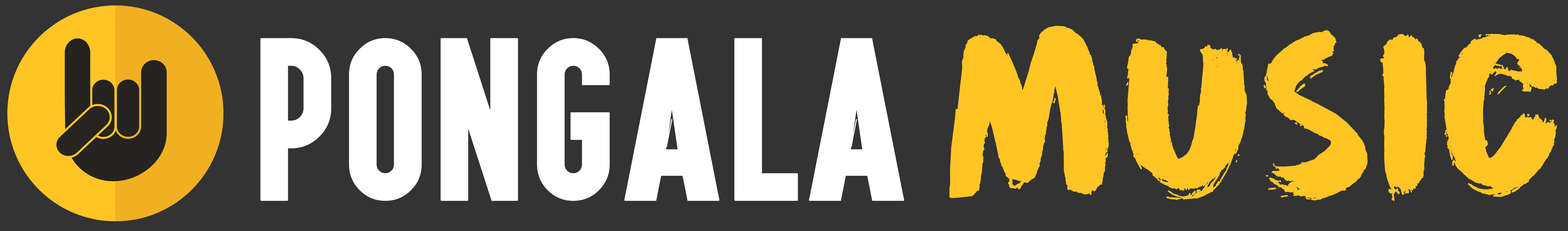
<style>
.page{position:relative;width:1568px;height:231px;background:#333333}
.page>*{position:absolute;margin:0}
.t1{font:202.3px "DKCinnabarBrush";color:#ffc525;text-transform:uppercase;font-weight:bold}
.t2{font:190.6px "Aku&Kamu";letter-spacing:0.025em;color:#ffffff;text-transform:uppercase;font-weight:bold}
</style>
<div class="page">
<p class="t1" style="left:949px;top:26px;width:608px;height:175px">MUSIC</p>
<p class="t2" style="left:260px;top:38px;width:644px;height:163px">PONGALA</p>
</div>
